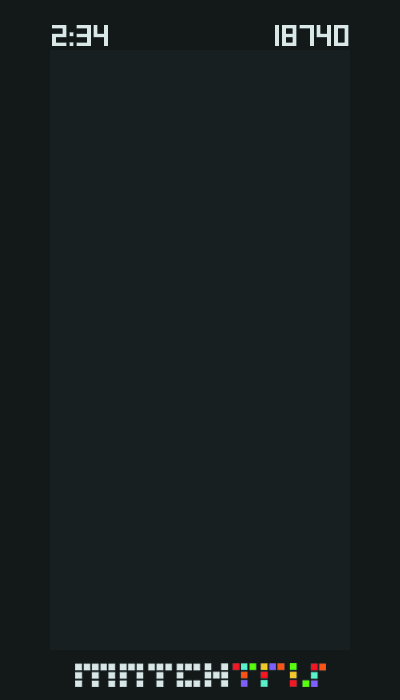
<style>
.page{position:relative;width:400px;height:700px;background:#181f20}
.page>*{position:absolute;margin:0}
.t1{font:30px "SquareFont";color:#dae7e7}
</style>
<div class="page">
<p class="t1" style="left:52px;top:25px;width:56px;height:21px">2:34</p>
<p class="t1" style="left:275px;top:25px;width:74px;height:21px">18740</p>
</div>
